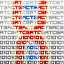
<style>
.page{position:relative;width:64px;height:64px}
.page>*{position:absolute;margin:0}
.t1{font:8px/5px "VisitorTT2BRK"}
</style>
<div class="page">
<p class="t1" style="left:0px;top:0px;width:64px;height:65px;text-align:justify">ATCGATCGATCGATCGT<br>TGACTGACTGACTGACG<br>ATCGATCGATCGATCGA<br>TGACTGACTGACTGACT<br>ATCGATCGATCGATCGC<br>TGACTGACTGACTGACG<br>ATCGATCGATCGATCGA<br>10101010101010101010101<br>0101010101010101010101<br>10101010101010101010101<br>0101010101010101010101<br>10101010101010101010101<br>01010101010101010101011</p>
<p class="t1" style="left:0px;top:0px;width:64px;height:65px;text-align:justify">ATCGATCGATCGATCGT<br>TGACTGACTGACTGACG<br>ATCGATCGATCGATCGA<br>TGACTGACTGACTGACT<br>ATCGATCGATCGATCGC<br>TGACTGACTGACTGACG<br>ATCGATCGATCGATCGA<br>10101010101010101010101<br>0101010101010101010101<br>10101010101010101010101<br>0101010101010101010101<br>10101010101010101010101<br>01010101010101010101011</p>
<p class="t1" style="left:0px;top:0px;width:64px;height:65px;text-align:justify">ATCGATCGATCGATCGT<br>TGACTGACTGACTGACG<br>ATCGATCGATCGATCGA<br>TGACTGACTGACTGACT<br>ATCGATCGATCGATCGC<br>TGACTGACTGACTGACG<br>ATCGATCGATCGATCGA<br>10101010101010101010101<br>0101010101010101010101<br>10101010101010101010101<br>0101010101010101010101<br>10101010101010101010101<br>01010101010101010101011</p>
</div>
